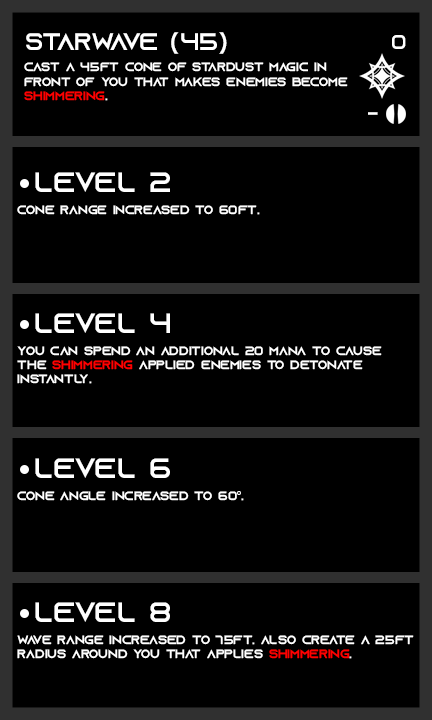
<style>
.page{position:relative;width:432px;height:720px;background:#000000}
.page>*{position:absolute;margin:0}
.t1{font:24px "AzonixRegular";color:#ffffff}
.t2{font:20px "AzonixRegular";color:#ffffff}
.t3{font:12px "AzonixRegular";color:#ffffff}
.t4{font:12px "AzonixRegular";color:#ff0000}
.t5{font:28px "AzonixRegular";color:#ffffff}
.t6{font:12px "MyriadPro-Regular";color:#ffffff}
</style>
<div class="page">
<p class="t1" style="left:26px;top:32px;width:201px;height:22px">starwave (45)</p>
<p class="t2" style="left:392px;top:35px;width:14px;height:14px">0</p>
<p class="t3" style="left:24px;top:62px;width:324px;height:39px">cast a 45ft cone of stardust magic in <br>front of you that makes enemies become <br><span class="t4">shimmering</span>.</p>
<p class="t2" style="left:368px;top:112px;width:10px;height:3px">-</p>
<p class="t5" style="left:35px;top:172px;width:135px;height:20px">level 2</p>
<p class="t3" style="left:17px;top:205px;width:243px;height:10px">cone range increased to 60ft.</p>
<p class="t5" style="left:35px;top:313px;width:135px;height:20px">level 4</p>
<p class="t3" style="left:17px;top:346px;width:365px;height:38px">you can spend an additional 20 mana to cause <br>the <span class="t4">shimmering</span> applied enemies to detonate <br>instantly.</p>
<p class="t5" style="left:35px;top:458px;width:135px;height:20px">level 6</p>
<p class="t3" style="left:17px;top:491px;width:227px;height:10px">cone angle increased to 60<span class="t6">°</span>.</p>
<p class="t5" style="left:35px;top:602px;width:135px;height:20px">level 8</p>
<p class="t3" style="left:17px;top:635px;width:397px;height:24px">wave range increased to 75ft. also create a 25ft<br>radius around you that applies <span class="t4">shimmering</span>.</p>
</div>
